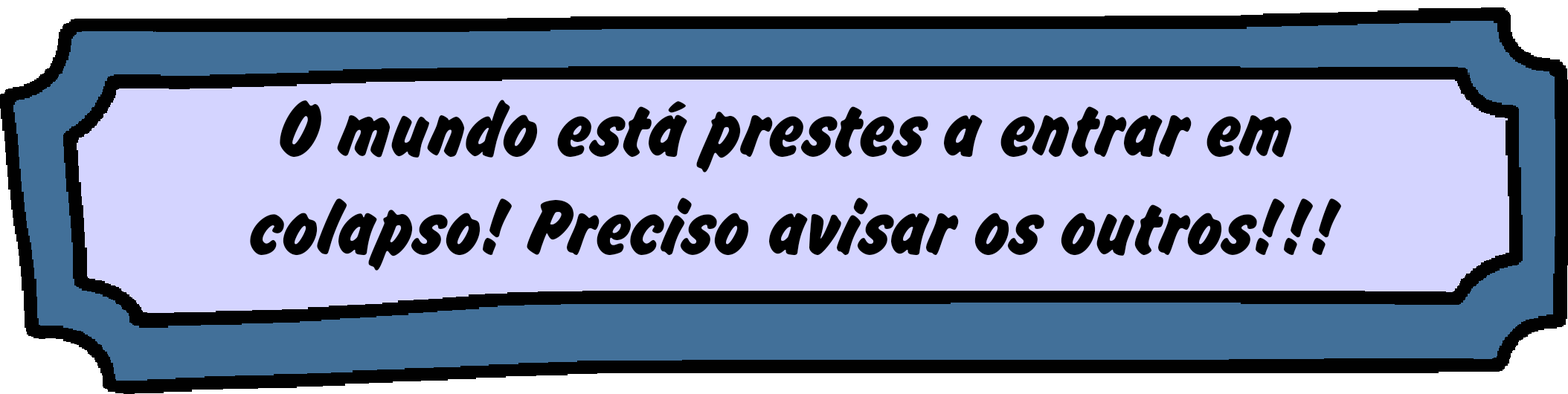
<style>
.page{position:relative;width:1568px;height:394px;background:#d4d4ff}
.page>*{position:absolute;margin:0}
.t1{font:81.8px "BrushHandNew";color:#000000}
</style>
<div class="page">
<p class="t1" style="left:250px;top:100px;width:1091px;height:171px;text-align:center">O mundo está prestes a entrar em <br>colapso! Preciso avisar os outros!!!</p>
</div>
